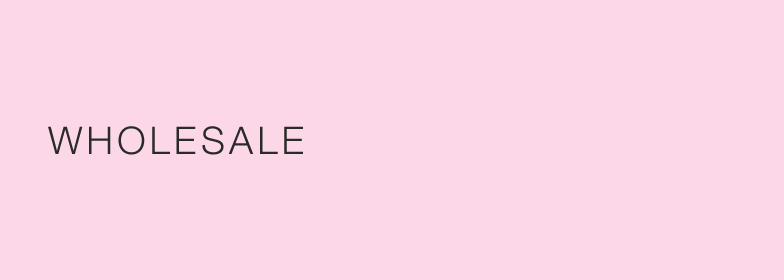
<style>
.page{position:relative;width:784px;height:280px;background:#fbd7e7}
.page>*{position:absolute;margin:0}
.t1{font:38px "HelveticaNeue-Light";letter-spacing:0.11em;color:#2a2a2a}
</style>
<div class="page">
<p class="t1" style="left:48px;top:126px;width:255px;height:29px">WHOLESALE</p>
</div>
